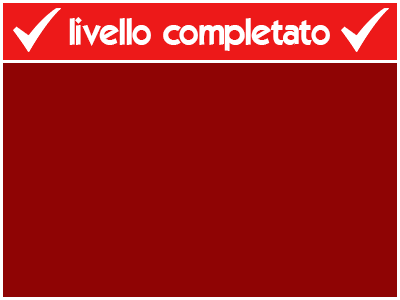
<style>
.page{position:relative;width:400px;height:300px;background:#8f0404}
.page>*{position:absolute;margin:0}
.t1{font:36px "ELEGANCE";color:#ffffff}
</style>
<div class="page">
<p class="t1" style="left:69px;top:17px;width:261px;height:34px">livello completato</p>
</div>
